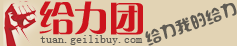
<style>
.page{position:relative;width:237px;height:46px;background:#e2d3b4}
.page>*{position:absolute;margin:0}
.t1{font:36px "GJJCQJW--GB1-0";color:#cc141d}
.t2{font:16px "SXSLST";color:#5f5b53}
.t3{font:12px "SimSun";color:#5f5b53}
</style>
<div class="page">
<p class="t1" style="left:39px;top:1px;width:104px;height:34px">给力团</p>
<p class="t2" style="left:145px;top:3px;width:92px;height:43px;rotate:-19deg">给力我的给力</p>
<p class="t3" style="left:40px;top:35px;width:103px;height:10px">tuan.geilibuy.com</p>
</div>
